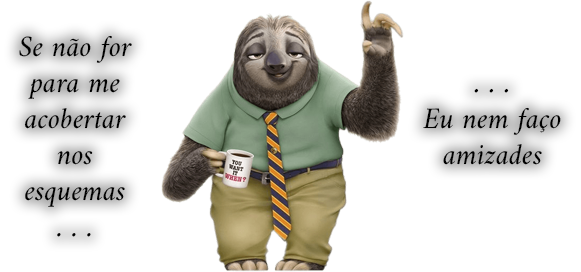
<style>
.page{position:relative;width:581px;height:272px;background:#ffffff}
.page>*{position:absolute;margin:0}
.t1{font:30px "Amiri-Slanted";color:#000000}
</style>
<div class="page">
<p class="t1" style="left:19px;top:35px;width:113px;height:202px">Se não for para me   acobertar  nos          esquemas     . . .</p>
<p class="t1" style="left:423px;top:88px;width:138px;height:77px;text-align:center">. . .<br>Eu nem faço amizades</p>
</div>
